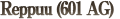
<style>
.page{position:relative;width:120px;height:19px;background:#ffffff}
.page>*{position:absolute;margin:0}
.t1{font:18px "RyuminPro-ExBold";letter-spacing:-0.08em;color:#4a3f32;font-weight:bold;scale:0.9 1}
</style>
<div class="page">
<p class="t1" style="left:0px;top:0px;width:114px;height:19px">Reppuu (601 AG)</p>
</div>
